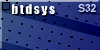
<style>
.page{position:relative;width:100px;height:50px}
.page>*{position:absolute;margin:0}
.t1{font:12.3px "Impact";letter-spacing:0.1em;color:#ffffff;scale:1.09 1}
.t2{font:11px "Arial-BoldMT";letter-spacing:-0.05em;color:#d0d7ff}
</style>
<div class="page">
<p class="t1" style="left:12px;top:4px;width:43px;height:12px">btdsys</p>
<p class="t2" style="left:78px;top:4px;width:18px;height:8px">S32</p>
</div>
